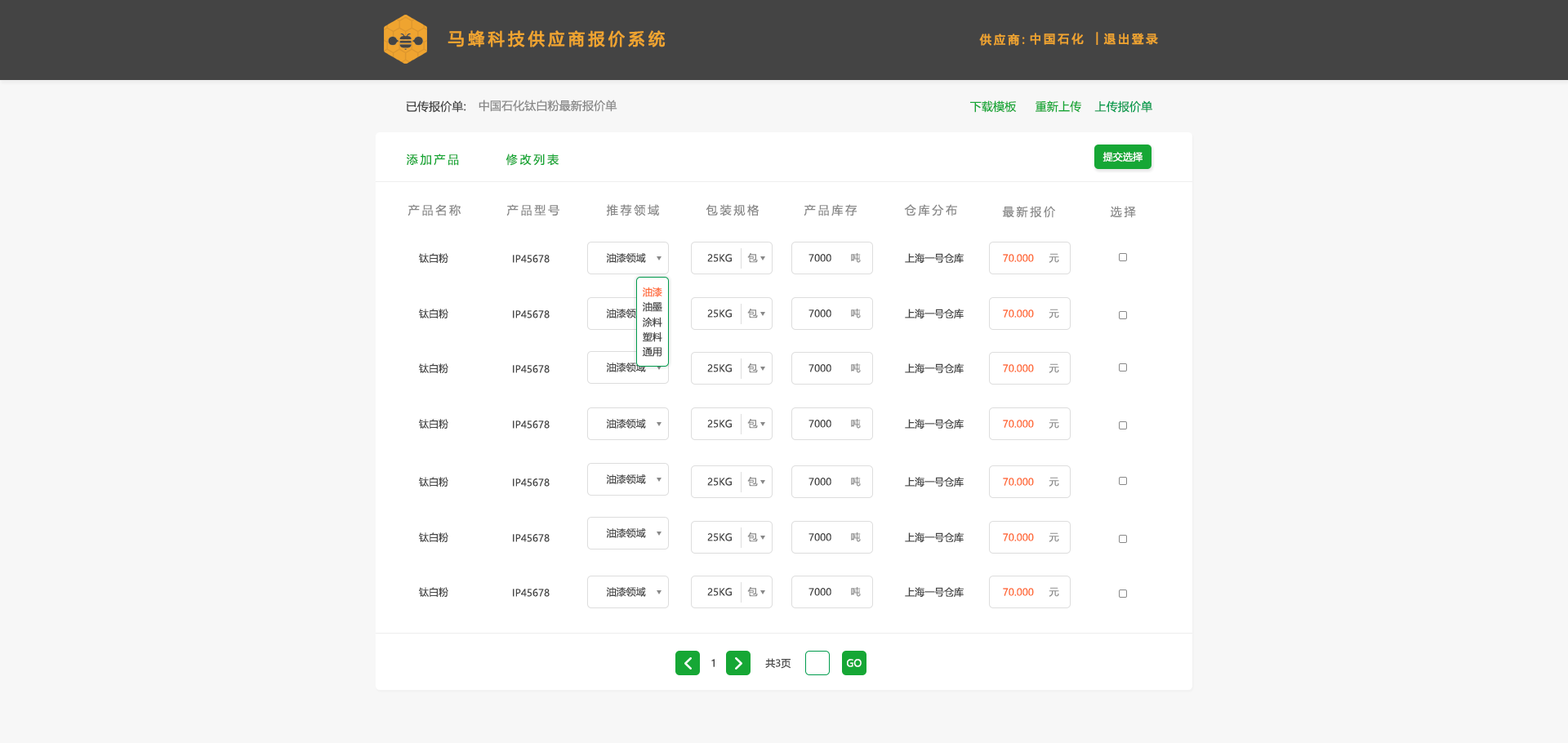
<style>
.page{position:relative;width:1568px;height:743px;background:#f7f7f7}
.page>*{position:absolute;margin:0}
.t1{font:16.3px "MicrosoftYaHei";letter-spacing:0.2em;color:#efa430;font-weight:bold}
.t2{font:11.4px "MicrosoftYaHei";letter-spacing:0.2em;color:#efa430;font-weight:bold}
.t3{font:11.4px "MicrosoftYaHei";letter-spacing:0.01em;color:#444444}
.t4{font:11.4px "MicrosoftYaHei";letter-spacing:0.01em;color:#888888}
.t5{font:11.4px "MicrosoftYaHei";letter-spacing:0.01em;color:#16a735}
.t6{font:11.4px "MicrosoftYaHei";letter-spacing:0.01em;color:#009b4c}
.t7{font:11.4px "MicrosoftYaHei";letter-spacing:0.2em;color:#16a735}
.t8{font:9.8px "MicrosoftYaHei";letter-spacing:0.01em;color:#ffffff}
.t9{font:11.4px "MicrosoftYaHei";letter-spacing:0.2em;color:#888888}
.t10{font:9.8px "MicrosoftYaHei";color:#444444}
.t11{font:9.8px "MicrosoftYaHei";color:#888888}
.t12{font:9.8px "MicrosoftYaHei";color:#ff6934}
.t13{font:9.8px "MicrosoftYaHei";color:#ffffff}
</style>
<div class="page">
<p class="t1" style="left:448px;top:30px;width:218px;height:17px">马蜂科技供应商报价系统</p>
<p class="t2" style="left:979px;top:33px;width:46px;height:13px">供应商:</p>
<p class="t2" style="left:1030px;top:33px;width:54px;height:12px">中国石化</p>
<p class="t2" style="left:1096px;top:32px;width:2px;height:13px">|</p>
<p class="t2" style="left:1103px;top:33px;width:55px;height:12px">退出登录</p>
<p class="t3" style="left:406px;top:100px;width:60px;height:13px">已传报价单:</p>
<p class="t4" style="left:479px;top:100px;width:138px;height:12px">中国石化钛白粉最新报价单</p>
<p class="t5" style="left:970px;top:100px;width:47px;height:13px">下载模板</p>
<p class="t5" style="left:1036px;top:100px;width:45px;height:13px">重新上传</p>
<p class="t6" style="left:1094px;top:100px;width:58px;height:13px">上传报价单</p>
<p class="t7" style="left:406px;top:154px;width:53px;height:12px">添加产品</p>
<p class="t7" style="left:506px;top:154px;width:53px;height:12px">修改列表</p>
<p class="t8" style="left:1102px;top:152px;width:41px;height:10px">提交选择</p>
<p class="t9" style="left:408px;top:204px;width:53px;height:12px">产品名称</p>
<p class="t9" style="left:506px;top:204px;width:53px;height:12px">产品型号</p>
<p class="t9" style="left:606px;top:204px;width:53px;height:12px">推荐领域</p>
<p class="t9" style="left:706px;top:204px;width:53px;height:12px">包装规格</p>
<p class="t9" style="left:804px;top:204px;width:53px;height:12px">产品库存</p>
<p class="t9" style="left:904px;top:204px;width:53px;height:12px">仓库分布</p>
<p class="t9" style="left:1002px;top:206px;width:53px;height:12px">最新报价</p>
<p class="t9" style="left:1110px;top:206px;width:26px;height:12px">选择</p>
<p class="t10" style="left:419px;top:253px;width:29px;height:10px">钛白粉</p>
<p class="t10" style="left:513px;top:255px;width:37px;height:8px">IP45678</p>
<p class="t10" style="left:606px;top:253px;width:40px;height:10px">油漆领域</p>
<p class="t10" style="left:707px;top:254px;width:25px;height:8px">25KG</p>
<p class="t11" style="left:747px;top:253px;width:11px;height:10px">包</p>
<p class="t10" style="left:808px;top:254px;width:23px;height:8px">7000</p>
<p class="t11" style="left:851px;top:253px;width:10px;height:10px">吨</p>
<p class="t10" style="left:905px;top:253px;width:59px;height:11px">上海一号仓库</p>
<p class="t12" style="left:1003px;top:254px;width:31px;height:8px">70.000</p>
<p class="t11" style="left:1049px;top:253px;width:10px;height:10px">元</p>
<p class="t12" style="left:642px;top:287px;width:20px;height:10px">油漆</p>
<p class="t10" style="left:642px;top:301px;width:20px;height:11px">油墨</p>
<p class="t10" style="left:419px;top:309px;width:29px;height:9px">钛白粉</p>
<p class="t10" style="left:513px;top:310px;width:37px;height:8px">IP45678</p>
<p class="t10" style="left:606px;top:309px;width:40px;height:9px">油漆领域</p>
<p class="t10" style="left:643px;top:317px;width:19px;height:10px">涂料</p>
<p class="t10" style="left:707px;top:310px;width:25px;height:8px">25KG</p>
<p class="t11" style="left:747px;top:309px;width:11px;height:9px">包</p>
<p class="t10" style="left:808px;top:310px;width:23px;height:8px">7000</p>
<p class="t11" style="left:851px;top:309px;width:10px;height:9px">吨</p>
<p class="t10" style="left:905px;top:309px;width:59px;height:10px">上海一号仓库</p>
<p class="t12" style="left:1003px;top:310px;width:31px;height:8px">70.000</p>
<p class="t11" style="left:1049px;top:309px;width:10px;height:9px">元</p>
<p class="t10" style="left:643px;top:332px;width:19px;height:10px">塑料</p>
<p class="t10" style="left:642px;top:347px;width:20px;height:10px">通用</p>
<p class="t10" style="left:419px;top:363px;width:29px;height:10px">钛白粉</p>
<p class="t10" style="left:513px;top:365px;width:37px;height:8px">IP45678</p>
<p class="t10" style="left:606px;top:363px;width:40px;height:9px">油漆领域</p>
<p class="t10" style="left:707px;top:364px;width:25px;height:8px">25KG</p>
<p class="t11" style="left:747px;top:363px;width:11px;height:10px">包</p>
<p class="t10" style="left:808px;top:364px;width:23px;height:8px">7000</p>
<p class="t11" style="left:851px;top:363px;width:10px;height:10px">吨</p>
<p class="t10" style="left:905px;top:363px;width:59px;height:11px">上海一号仓库</p>
<p class="t12" style="left:1003px;top:364px;width:31px;height:8px">70.000</p>
<p class="t11" style="left:1049px;top:363px;width:10px;height:10px">元</p>
<p class="t10" style="left:419px;top:419px;width:29px;height:10px">钛白粉</p>
<p class="t10" style="left:513px;top:421px;width:37px;height:8px">IP45678</p>
<p class="t10" style="left:606px;top:419px;width:40px;height:10px">油漆领域</p>
<p class="t10" style="left:707px;top:420px;width:25px;height:8px">25KG</p>
<p class="t11" style="left:747px;top:419px;width:11px;height:10px">包</p>
<p class="t10" style="left:808px;top:420px;width:23px;height:8px">7000</p>
<p class="t11" style="left:851px;top:419px;width:10px;height:10px">吨</p>
<p class="t10" style="left:905px;top:419px;width:59px;height:11px">上海一号仓库</p>
<p class="t12" style="left:1003px;top:420px;width:31px;height:8px">70.000</p>
<p class="t11" style="left:1049px;top:419px;width:10px;height:10px">元</p>
<p class="t10" style="left:419px;top:477px;width:29px;height:10px">钛白粉</p>
<p class="t10" style="left:513px;top:479px;width:37px;height:8px">IP45678</p>
<p class="t10" style="left:606px;top:474px;width:40px;height:10px">油漆领域</p>
<p class="t10" style="left:707px;top:478px;width:25px;height:8px">25KG</p>
<p class="t11" style="left:747px;top:477px;width:11px;height:10px">包</p>
<p class="t10" style="left:808px;top:478px;width:23px;height:8px">7000</p>
<p class="t11" style="left:851px;top:477px;width:10px;height:10px">吨</p>
<p class="t10" style="left:905px;top:477px;width:59px;height:11px">上海一号仓库</p>
<p class="t12" style="left:1003px;top:478px;width:31px;height:8px">70.000</p>
<p class="t11" style="left:1049px;top:477px;width:10px;height:10px">元</p>
<p class="t10" style="left:419px;top:532px;width:29px;height:10px">钛白粉</p>
<p class="t10" style="left:606px;top:528px;width:40px;height:10px">油漆领域</p>
<p class="t10" style="left:707px;top:533px;width:25px;height:8px">25KG</p>
<p class="t11" style="left:747px;top:532px;width:11px;height:10px">包</p>
<p class="t10" style="left:808px;top:533px;width:23px;height:8px">7000</p>
<p class="t11" style="left:851px;top:532px;width:10px;height:10px">吨</p>
<p class="t10" style="left:905px;top:532px;width:59px;height:11px">上海一号仓库</p>
<p class="t12" style="left:1003px;top:533px;width:31px;height:8px">70.000</p>
<p class="t11" style="left:1049px;top:532px;width:10px;height:10px">元</p>
<p class="t10" style="left:513px;top:534px;width:37px;height:8px">IP45678</p>
<p class="t10" style="left:419px;top:587px;width:29px;height:10px">钛白粉</p>
<p class="t10" style="left:513px;top:589px;width:37px;height:8px">IP45678</p>
<p class="t10" style="left:606px;top:587px;width:40px;height:10px">油漆领域</p>
<p class="t10" style="left:707px;top:588px;width:25px;height:8px">25KG</p>
<p class="t11" style="left:747px;top:587px;width:11px;height:10px">包</p>
<p class="t10" style="left:808px;top:588px;width:23px;height:8px">7000</p>
<p class="t11" style="left:851px;top:587px;width:10px;height:10px">吨</p>
<p class="t10" style="left:905px;top:587px;width:59px;height:11px">上海一号仓库</p>
<p class="t12" style="left:1003px;top:588px;width:31px;height:8px">70.000</p>
<p class="t11" style="left:1049px;top:587px;width:10px;height:10px">元</p>
<p class="t10" style="left:711px;top:659px;width:4px;height:8px">1</p>
<p class="t10" style="left:765px;top:658px;width:26px;height:11px">共3页</p>
<p class="t13" style="left:847px;top:659px;width:15px;height:8px">GO</p>
</div>
